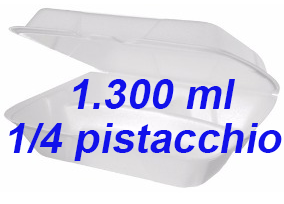
<style>
.page{position:relative;width:284px;height:204px;background:#fefefe}
.page>*{position:absolute;margin:0}
.t1{font:72px "Arial-BoldMT";color:#1111ea;font-style:italic}
</style>
<div class="page">
<p class="t1" style="left:73px;top:79px;width:162px;height:30px">1.300 ml</p>
<p class="t1" style="left:9px;top:123px;width:273px;height:38px">1/4 pistacchio</p>
</div>
